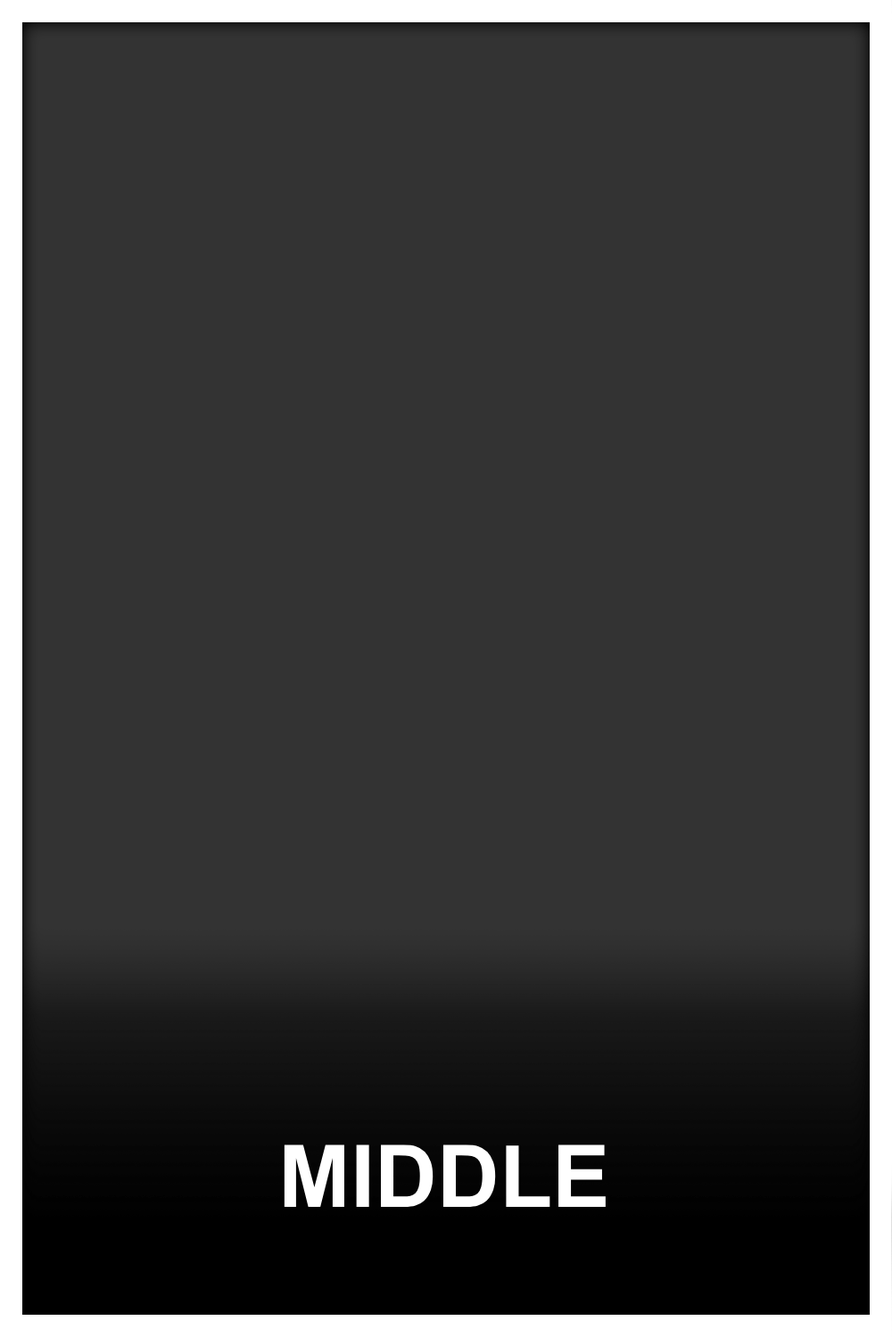
<style>
.page{position:relative;width:892px;height:1337px;background:#333333}
.page>*{position:absolute;margin:0}
.t1{font:86.5px "Arial-BoldMT";color:#ffffff}
</style>
<div class="page">
<p class="t1" style="left:284px;top:1145px;width:321px;height:62px">MIDDLE</p>
</div>
